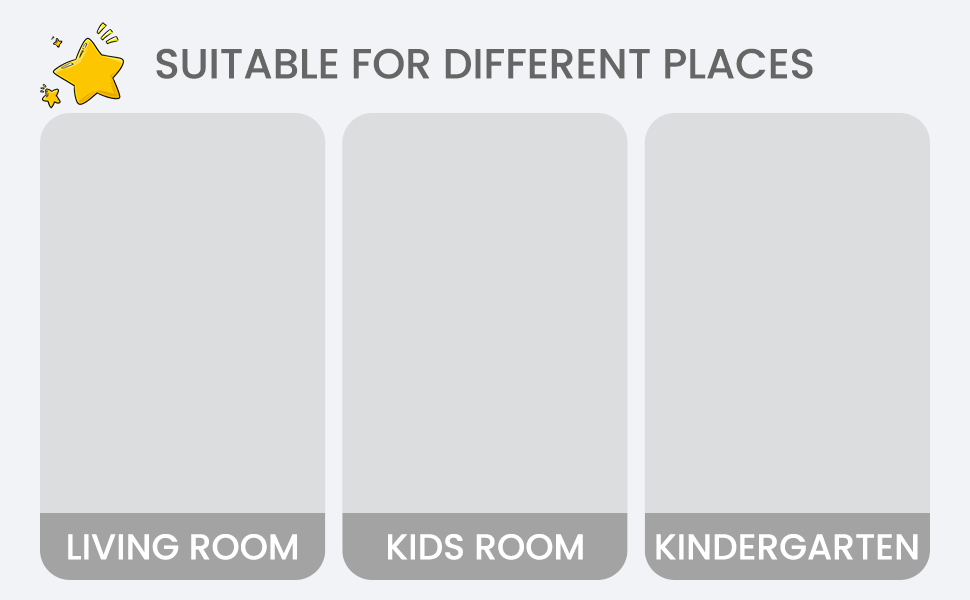
<style>
.page{position:relative;width:970px;height:600px;background:#dcdddf}
.page>*{position:absolute;margin:0}
.t1{font:42px "Poppins-Medium";color:#666666}
.t2{font:36px "Poppins-Medium";color:#ffffff}
</style>
<div class="page">
<p class="t1" style="left:156px;top:48px;width:657px;height:31px">SUITABLE FOR DIFFERENT PLACES</p>
<p class="t2" style="left:68px;top:534px;width:229px;height:26px">LIVING ROOM</p>
<p class="t2" style="left:388px;top:534px;width:195px;height:26px">KIDS ROOM</p>
<p class="t2" style="left:656px;top:534px;width:262px;height:26px">KINDERGARTEN</p>
</div>
